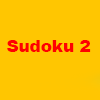
<style>
.page{position:relative;width:100px;height:100px;background:#ffc601}
.page>*{position:absolute;margin:0}
.t1{font:16.7px "Arial-Black";color:#ff0101}
</style>
<div class="page">
<p class="t1" style="left:7px;top:40px;width:84px;height:12px">Sudoku 2</p>
</div>
